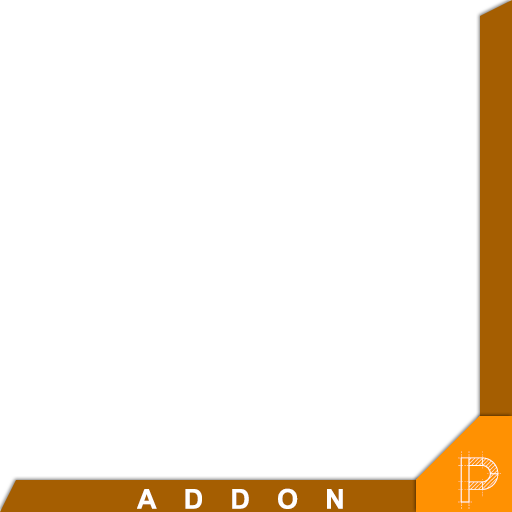
<style>
.page{position:relative;width:512px;height:512px;background:#ffffff}
.page>*{position:absolute;margin:0}
.t1{font:72.2px "RollandinEmilie";color:#ffffff}
.t2{font:27.1px "Arial-BoldMT";letter-spacing:1em;color:#ffffff}
</style>
<div class="page">
<p class="t1" style="left:458px;top:451px;width:43px;height:58px">P</p>
<p class="t2" style="left:137px;top:488px;width:206px;height:21px">ADDON</p>
</div>
